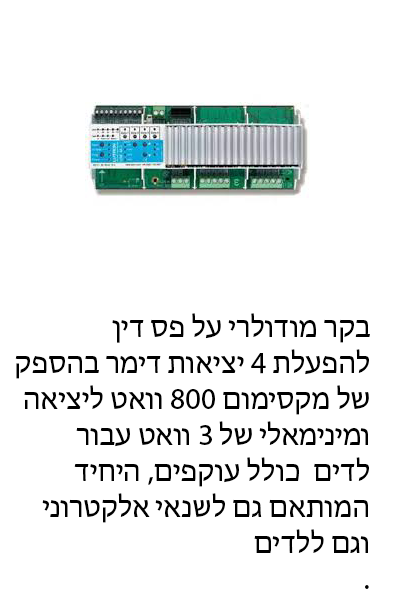
<style>
.page{position:relative;width:400px;height:600px;background:#ffffff}
.page>*{position:absolute;margin:0}
.t1{font:30px "MyriadHebrew-Regular";color:#000000}
</style>
<div class="page">
<p class="t1" style="left:15px;top:313px;width:355px;height:276px;text-align:right">בקר מודולרי על פס דין<br>  להפעלת 4 יציאות דימר בהספק<br>של מקסימום 800 וואט ליציאה<br>ומינימאלי של 3 וואט עבור<br>לדים  כולל עוקפים, היחיד<br>המותאם גם לשנאי אלקטרוני<br>וגם ללדים<br>.</p>
</div>
